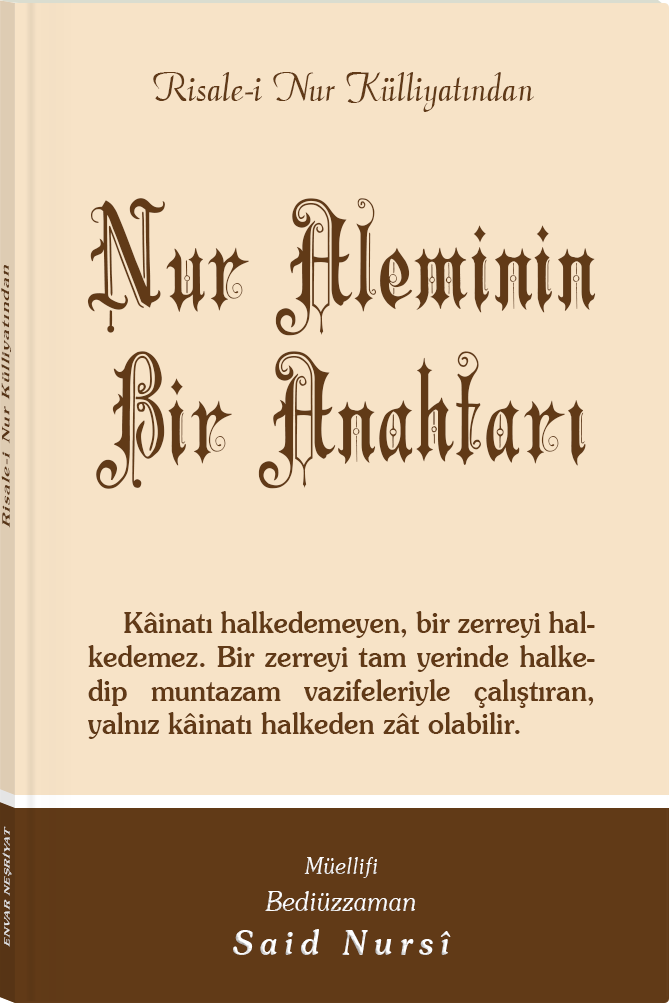
<style>
.page{position:relative;width:669px;height:1003px;background:#f7e3c7}
.page>*{position:absolute;margin:0}
.t1{font:45.3px "Barla © 072 Aria ScriptScriptSSi";color:#613a17;scale:0.94 1}
.t2{font:139.5px/124.4px "Barla © 001 Liva Nur";letter-spacing:-0.001em;color:#613a17;scale:0.93 1}
.t3{font:139.5px/153.1px "Barla © 001 Liva Nur";letter-spacing:-0.001em;color:#613a17;scale:0.93 1}
.t4{font:11.4px "Souvenir-Medium";letter-spacing:0.08em;color:#613a17;scale:1.65 1}
.t5{font:29.2px/33.7px "Souvenir-Medium";color:#613a17;scale:0.92 1}
.t6{font:8.3px "Souvenir-Medium";letter-spacing:0.08em;color:#e5e5e5;scale:1.43 1}
.t7{font:27.1px/37.8px "Souvenir-LightItalic";color:#ffffff;scale:0.92 1}
.t8{font:22.8px/39.8px "Souvenir-LightItalic";color:#ffffff;scale:0.92 1}
.t9{font:33.9px/43.8px "Souvenir-MediumItalic";letter-spacing:0.2em;color:#ffffff;scale:0.92 1}
</style>
<div class="page">
<p class="t1" style="left:153px;top:72px;width:381px;height:40px">Risale-i Nur Külliyatından</p>
<p class="t2" style="left:87px;top:198px;width:509px;height:291px;text-align:center">Nur Aleminin<br><span class="t3">Bir Anahtarı</span></p>
<p class="t4" style="left:1px;top:265px;width:10px;height:263px;rotate:-90deg">Risale-i Nur Külliyatından</p>
<p class="t5" style="left:88px;top:611px;width:507px;height:128px;text-align:justify">Kâinatı halkedemeyen, bir zerreyi halkedemez. Bir zerreyi tam yerinde halkedip muntazam vazifeleriyle çalıştıran, yalnız kâinatı halkeden zât olabilir.</p>
<p class="t6" style="left:2px;top:826px;width:10px;height:121px;rotate:-90deg">ENVAR NEŞRİYAT</p>
<p class="t7" style="left:233px;top:857px;width:218px;height:98px;text-align:center"><span class="t8">Müellifi<br></span>Bediüzzaman<br><span class="t9">Said Nursî</span></p>
</div>
